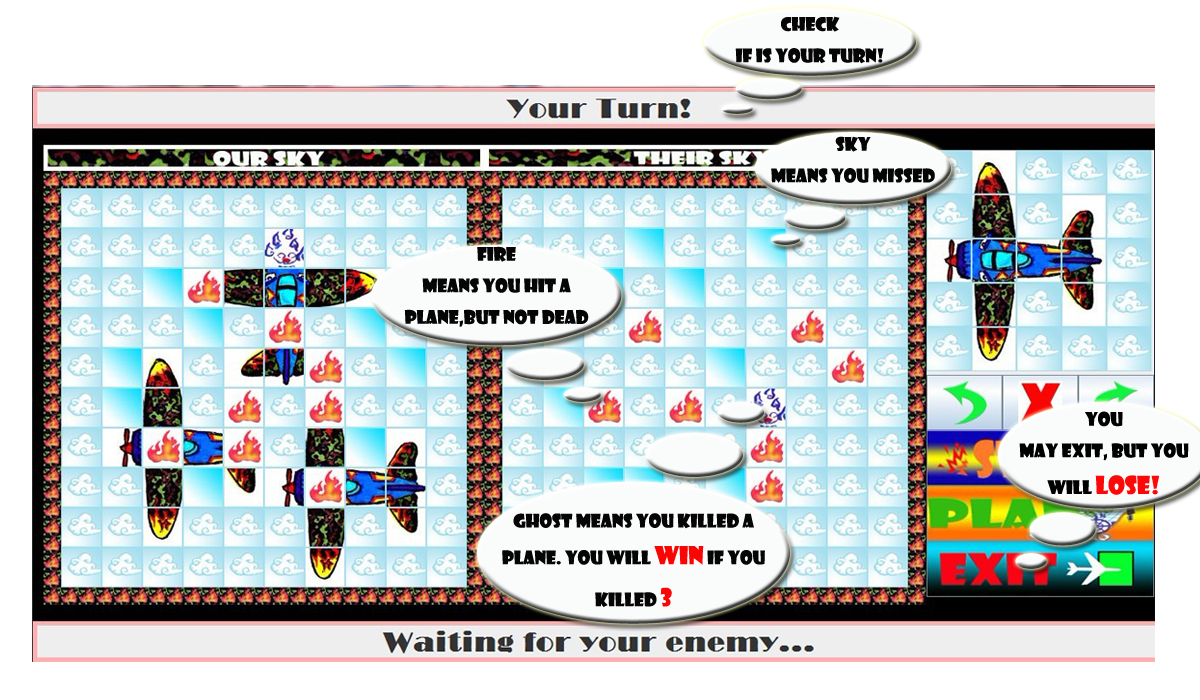
<style>
.page{position:relative;width:1200px;height:700px;background:#ffffff}
.page>*{position:absolute;margin:0}
.t1{font:18px "ShowcardGothic-Reg";color:#050505}
.t2{font:18px "ShowcardGothic-Reg";color:#000000}
.t3{font:24px "ShowcardGothic-Reg";color:#fc0808}
.t4{font:24px "ShowcardGothic-Reg";color:#fb0404}
.t5{font:24px "ShowcardGothic-Reg";color:#fa0606}
</style>
<div class="page">
<p class="t1" style="left:735px;top:16px;width:149px;height:48px;text-align:center">check if is your turn!</p>
<p class="t1" style="left:771px;top:136px;width:164px;height:47px;text-align:center">Sky means you missed</p>
<p class="t1" style="left:404px;top:246px;width:185px;height:81px;text-align:center">fire means you hit a plane,but not dead</p>
<p class="t2" style="left:1019px;top:411px;width:170px;height:84px;text-align:center">You may exit, but you will <span class="t3">lose!</span></p>
<p class="t1" style="left:502px;top:513px;width:263px;height:94px;text-align:center">ghost means you killed a plane. you will <span class="t4">win</span> if you killed <span class="t5">3</span></p>
</div>
